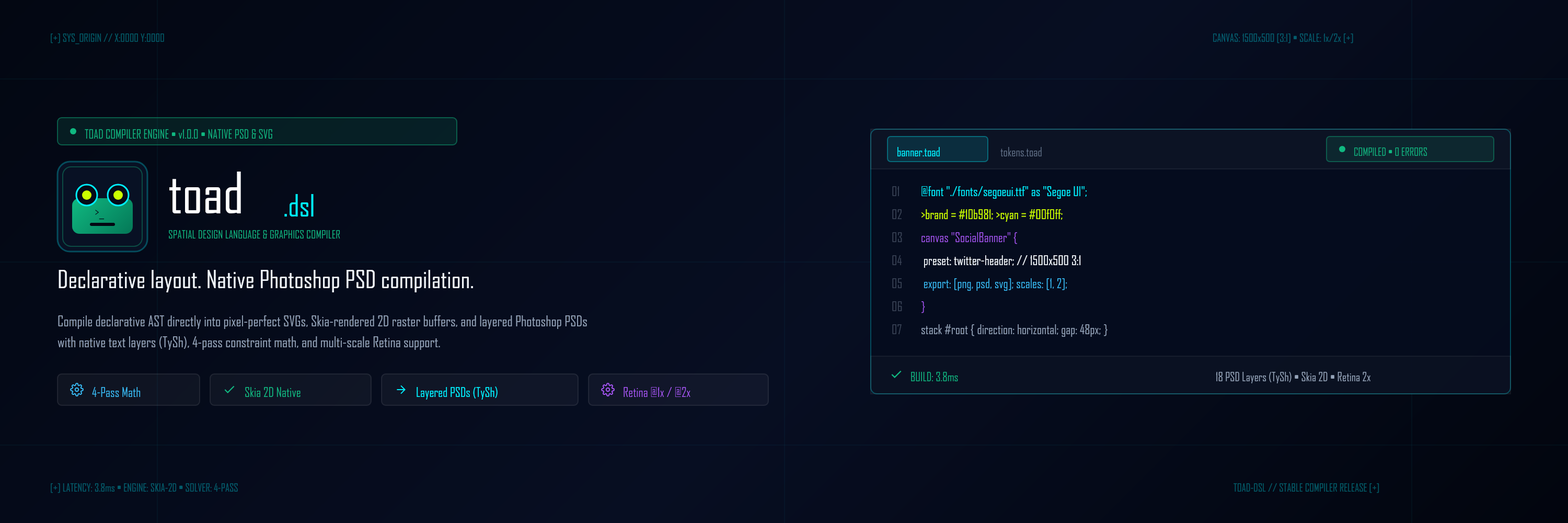
<style>
.page{position:relative;width:1568px;height:523px}
.page>*{position:absolute;margin:0}
.t1{font:10.5px "Consolas-Bold";letter-spacing:0.15em}
.t2{font:11.5px "Consolas-Bold";letter-spacing:0.109em;color:#10b981}
.t3{font:11.5px "Consolas-Bold";color:#00f0ff}
.t4{font:11.5px "Consolas";color:#64748b}
.t5{font:10.5px "Consolas-Bold";letter-spacing:0.08em;color:#10b981}
.t6{font:54.4px "SegoeUI-Bold";letter-spacing:-0.029em;color:#ffffff}
.t7{font:12.5px "Consolas"}
.t8{font:12.5px "Consolas";color:#00f0ff}
.t9{font:29.3px "SegoeUI-Bold";color:#00f0ff}
.t10{font:13.6px "Consolas-Bold";color:#030712}
.t11{font:12.5px "Consolas";color:#ccff00}
.t12{font:11px "Consolas-Bold";letter-spacing:0.21em;color:#10b981}
.t13{font:12.5px "Consolas-Bold";color:#a855f7}
.t14{font:12.5px "Consolas";color:#f1f5f9}
.t15{font:24.6px "SegoeUI-Bold";letter-spacing:-0.021em;color:#f1f5f9}
.t16{font:12.5px "Consolas";color:#38bdf8}
.t17{font:14.1px "SegoeUI";color:#94a3b8}
.t18{font:12.5px "Consolas";color:#94a3b8}
.t19{font:11.5px "Consolas-Bold";letter-spacing:0.045em;color:#10b981}
.t20{font:11.5px "Consolas";color:#94a3b8}
.t21{font:12.5px "Consolas-Bold";color:#38bdf8}
.t22{font:12.5px "Consolas-Bold";color:#10b981}
.t23{font:12.5px "Consolas-Bold";color:#00f0ff}
.t24{font:10.5px "Consolas-Bold";letter-spacing:0.12em}
</style>
<div class="page">
<p class="t1" style="left:50px;top:33px;width:226px;height:14px">[+] SYS_ORIGIN // X:0000 Y:0000</p>
<p class="t1" style="left:1213px;top:33px;width:299px;height:14px">CANVAS: 1500x500 [3:1] • SCALE: 1x/2x [+]</p>
<p class="t2" style="left:85px;top:129px;width:362px;height:15px">TOAD COMPILER ENGINE • v1.0.0 • NATIVE PSD &amp; SVG</p>
<p class="t3" style="left:897px;top:147px;width:70px;height:15px">banner.toad</p>
<p class="t4" style="left:1000px;top:147px;width:70px;height:15px">tokens.toad</p>
<p class="t5" style="left:1354px;top:147px;width:124px;height:14px">COMPILED • 0 ERRORS</p>
<p class="t6" style="left:168px;top:169px;width:112px;height:68px">toad</p>
<p class="t7" style="left:892px;top:186px;width:14px;height:15px">01</p>
<p class="t8" style="left:921px;top:186px;width:291px;height:15px">@font "./fonts/segoeui.ttf" as "Segoe UI";</p>
<p class="t9" style="left:283px;top:192px;width:48px;height:37px">.dsl</p>
<p class="t10" style="left:95px;top:205px;width:15px;height:17px">&gt;_</p>
<p class="t7" style="left:892px;top:209px;width:14px;height:15px">02</p>
<p class="t11" style="left:921px;top:209px;width:241px;height:15px">&gt;brand = #10b981; &gt;cyan = #00f0ff;</p>
<p class="t12" style="left:168px;top:230px;width:357px;height:14px">SPATIAL DESIGN LANGUAGE &amp; GRAPHICS COMPILER</p>
<p class="t7" style="left:892px;top:232px;width:14px;height:15px">03</p>
<p class="t13" style="left:921px;top:232px;width:159px;height:15px">canvas "SocialBanner" {</p>
<p class="t7" style="left:892px;top:255px;width:14px;height:15px">04</p>
<p class="t14" style="left:921px;top:255px;width:304px;height:15px">preset: twitter-header; // 1500x500 3:1</p>
<p class="t15" style="left:57px;top:268px;width:764px;height:30px">Declarative layout. Native Photoshop PSD compilation.</p>
<p class="t7" style="left:892px;top:278px;width:14px;height:15px">05</p>
<p class="t16" style="left:921px;top:278px;width:304px;height:15px">export: [png, psd, svg]; scales: [1, 2];</p>
<p class="t7" style="left:892px;top:301px;width:14px;height:15px">06</p>
<p class="t13" style="left:921px;top:301px;width:7px;height:15px">}</p>
<p class="t17" style="left:57px;top:315px;width:743px;height:42px">Compile declarative AST directly into pixel-perfect SVGs, Skia-rendered 2D raster buffers, and layered Photoshop PSDs<br>with native text layers (TySh), 4-pass constraint math, and multi-scale Retina support.</p>
<p class="t7" style="left:892px;top:324px;width:14px;height:15px">07</p>
<p class="t18" style="left:921px;top:324px;width:339px;height:15px">stack #root { direction: horizontal; gap: 48px; }</p>
<p class="t19" style="left:910px;top:372px;width:83px;height:14px">BUILD: 3.8ms</p>
<p class="t20" style="left:1216px;top:372px;width:266px;height:14px">18 PSD Layers (TySh) • Skia 2D • Retina 2x</p>
<p class="t21" style="left:92px;top:386px;width:76px;height:16px">4-Pass Math</p>
<p class="t22" style="left:245px;top:386px;width:97px;height:16px">Skia 2D Native</p>
<p class="t23" style="left:416px;top:386px;width:132px;height:16px">Layered PSDs (TySh)</p>
<p class="t13" style="left:623px;top:386px;width:111px;height:16px">Retina @1x / @2x</p>
<p class="t24" style="left:50px;top:483px;width:370px;height:14px">[+] LATENCY: 3.8ms • ENGINE: SKIA-2D • SOLVER: 4-PASS</p>
<p class="t24" style="left:1233px;top:483px;width:273px;height:14px">TOAD-DSL // STABLE COMPILER RELEASE [+]</p>
</div>
